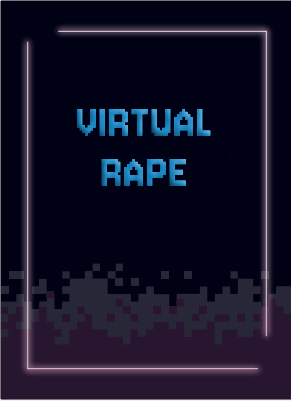
<style>
.page{position:relative;width:291px;height:401px;background:#000115}
.page>*{position:absolute;margin:0}
.t1{font:50px/50px "Jersey10-Regular";letter-spacing:0.025em}
</style>
<div class="page">
<p class="t1" style="left:76px;top:108px;width:135px;height:78px;text-align:center">VIRTUAL<br>RAPE</p>
</div>
